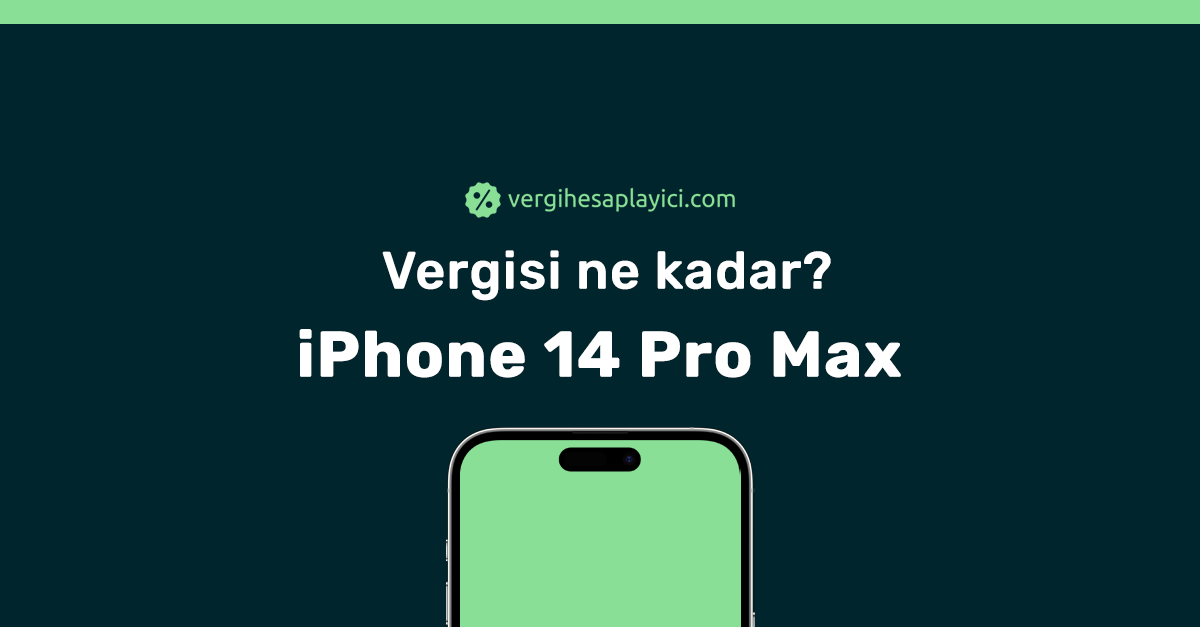
<style>
.page{position:relative;width:1200px;height:627px;background:#01252c}
.page>*{position:absolute;margin:0}
.t1{font:52px/88px "Rubik-Medium";color:#ffffff;font-weight:bold}
.t2{font:64px/88px "Rubik-Bold";color:#ffffff;font-weight:bold}
</style>
<div class="page">
<p class="t1" style="left:299px;top:250px;width:602px;height:128px;text-align:center">Vergisi ne kadar?<br><span class="t2">iPhone 14 Pro Max</span></p>
</div>
